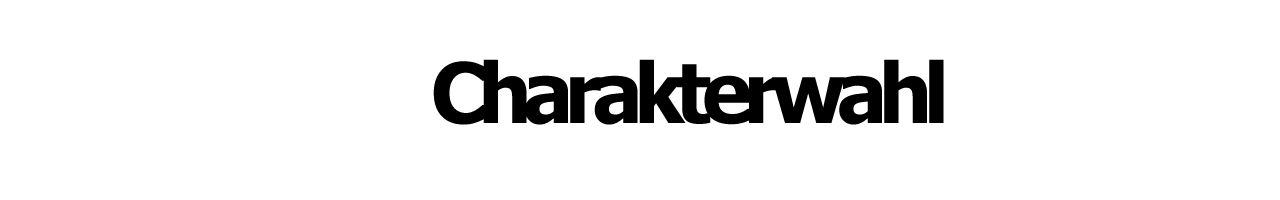
<style>
.page{position:relative;width:1280px;height:200px;background:#ffffff}
.page>*{position:absolute;margin:0}
.t1{font:83.3px "Tahoma-Bold";letter-spacing:-0.1em;color:#000000}
</style>
<div class="page">
<p class="t1" style="left:433px;top:59px;width:511px;height:66px">Charakterwahl</p>
</div>
